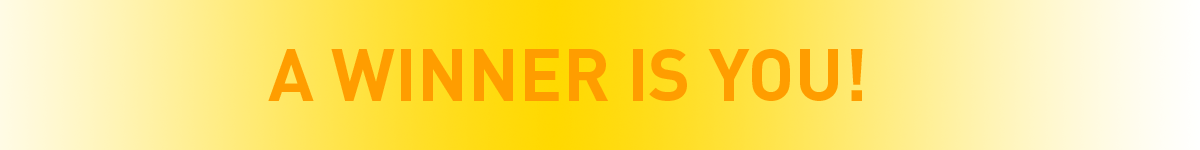
<style>
.page{position:relative;width:1200px;height:150px}
.page>*{position:absolute;margin:0}
.t1{font:72px "DINPro-Bold";color:#ff9d00}
</style>
<div class="page">
<p class="t1" style="left:268px;top:49px;width:595px;height:52px">A WINNER IS YOU!</p>
</div>
